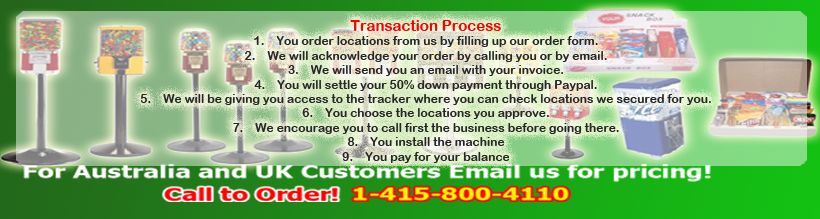
<style>
.page{position:relative;width:820px;height:219px}
.page>*{position:absolute;margin:0}
.t1{font:12px "ArialRoundedMTBold";color:#272727}
.t2{font:15px "ArialRoundedMTBold";color:#fc0000}
</style>
<div class="page">
<p class="t1" style="left:140px;top:20px;width:571px;height:143px;text-align:center"><span class="t2">Transaction Process<br></span>1.    You order locations from us by filling up our order form.<br>2.    We will acknowledge your order by calling you or by email.<br>3.    We will send you an email with your invoice.<br>4.    You will settle your 50% down payment through Paypal.<br>5.    We will be giving you access to the tracker where you can check locations we secured for you.<br>6.    You choose the locations you approve.<br>7.    We encourage you to call first the business before going there.<br>8.    You install the machine<br>9.    You pay for your balance</p>
</div>
